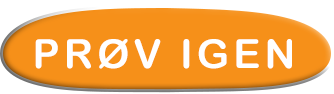
<style>
.page{position:relative;width:334px;height:94px;background:#f69019}
.page>*{position:absolute;margin:0}
.t1{font:40px "ArialRoundedMTBold";letter-spacing:0.1em;color:#ffffff}
</style>
<div class="page">
<p class="t1" style="left:35px;top:39px;width:257px;height:30px">PRØV IGEN</p>
</div>
